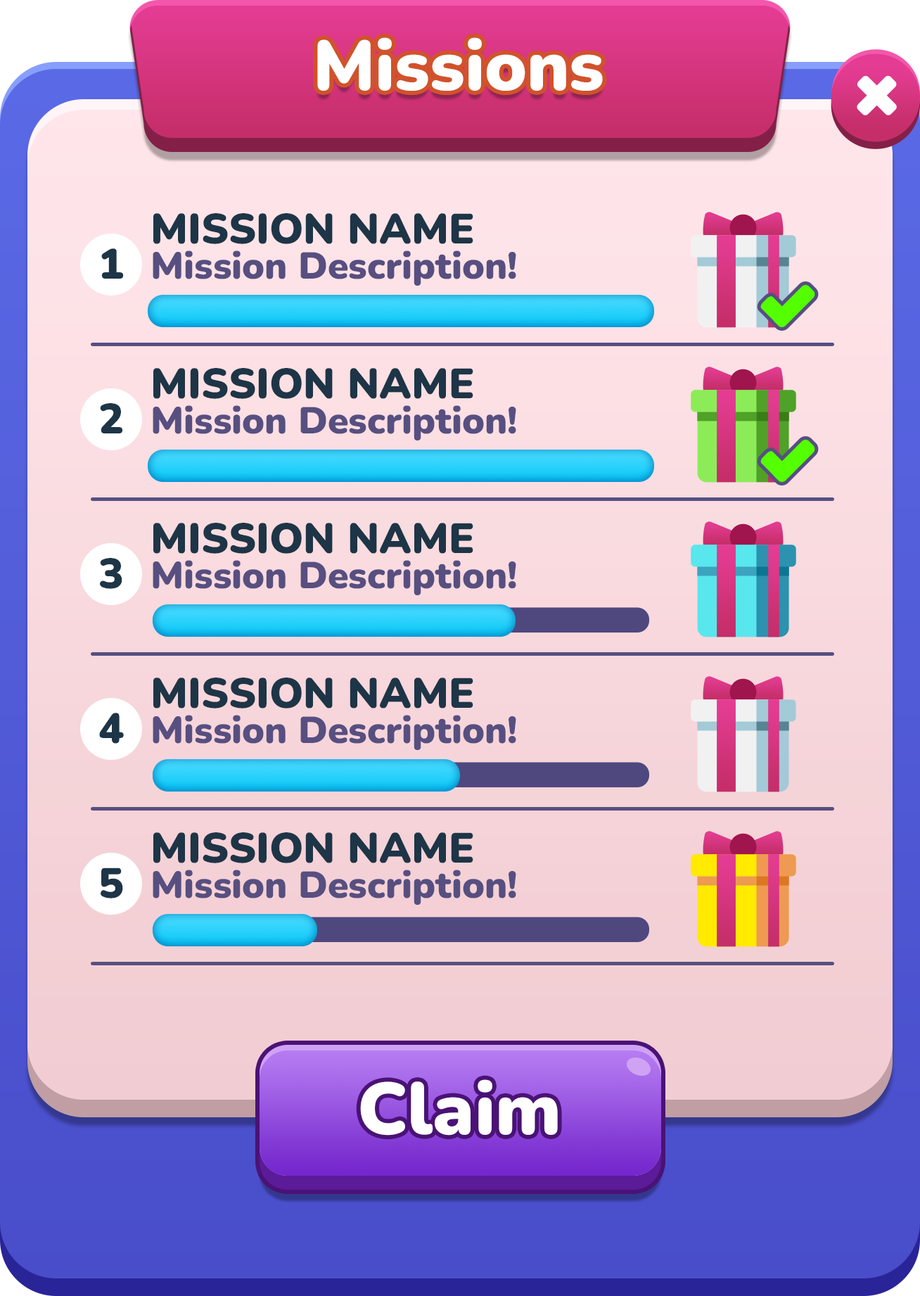
<style>
.page{position:relative;width:920px;height:1296px}
.page>*{position:absolute;margin:0}
.t1{font:70.4px "Nunito-Black";color:#ffffff}
.t2{font:42.2px "Nunito-Black";color:#1d3546}
.t3{font:37.5px "Nunito-Black";color:#574f80}
.t4{font:73.2px "Nunito-Black";color:#ffffff}
</style>
<div class="page">
<p class="t1" style="left:317px;top:37px;width:286px;height:54px">Missions</p>
<p class="t2" style="left:153px;top:213px;width:320px;height:31px">MISSION NAME</p>
<p class="t2" style="left:101px;top:248px;width:23px;height:31px">1</p>
<p class="t3" style="left:153px;top:250px;width:363px;height:36px">Mission Description!</p>
<p class="t2" style="left:153px;top:368px;width:320px;height:31px">MISSION NAME</p>
<p class="t2" style="left:100px;top:403px;width:22px;height:30px">2</p>
<p class="t3" style="left:153px;top:405px;width:363px;height:35px">Mission Description!</p>
<p class="t2" style="left:153px;top:523px;width:320px;height:31px">MISSION NAME</p>
<p class="t2" style="left:100px;top:558px;width:22px;height:31px">3</p>
<p class="t3" style="left:153px;top:560px;width:363px;height:35px">Mission Description!</p>
<p class="t2" style="left:153px;top:677px;width:320px;height:31px">MISSION NAME</p>
<p class="t2" style="left:99px;top:713px;width:25px;height:31px">4</p>
<p class="t3" style="left:153px;top:715px;width:363px;height:35px">Mission Description!</p>
<p class="t2" style="left:153px;top:832px;width:320px;height:31px">MISSION NAME</p>
<p class="t2" style="left:101px;top:867px;width:22px;height:31px">5</p>
<p class="t3" style="left:153px;top:870px;width:363px;height:35px">Mission Description!</p>
<p class="t4" style="left:360px;top:1079px;width:198px;height:56px">Claim</p>
</div>
